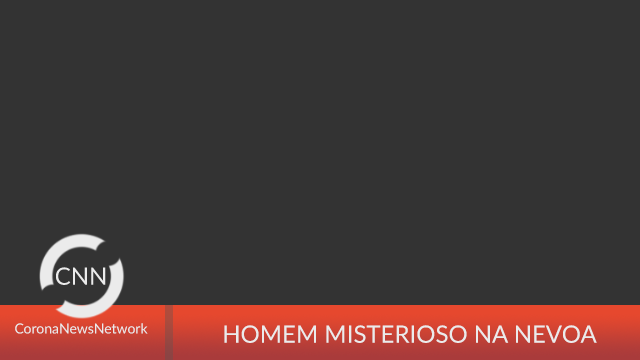
<style>
.page{position:relative;width:640px;height:360px;background:#333333}
.page>*{position:absolute;margin:0}
.t1{font:24px "Lato-Regular";color:#ebebeb}
.t2{font:14px "Lato-Regular";color:#ebebeb}
</style>
<div class="page">
<p class="t1" style="left:56px;top:267px;width:50px;height:18px">CNN</p>
<p class="t2" style="left:15px;top:323px;width:133px;height:11px">CoronaNewsNetwork</p>
<p class="t1" style="left:224px;top:325px;width:373px;height:18px">HOMEM MISTERIOSO NA NEVOA</p>
</div>
